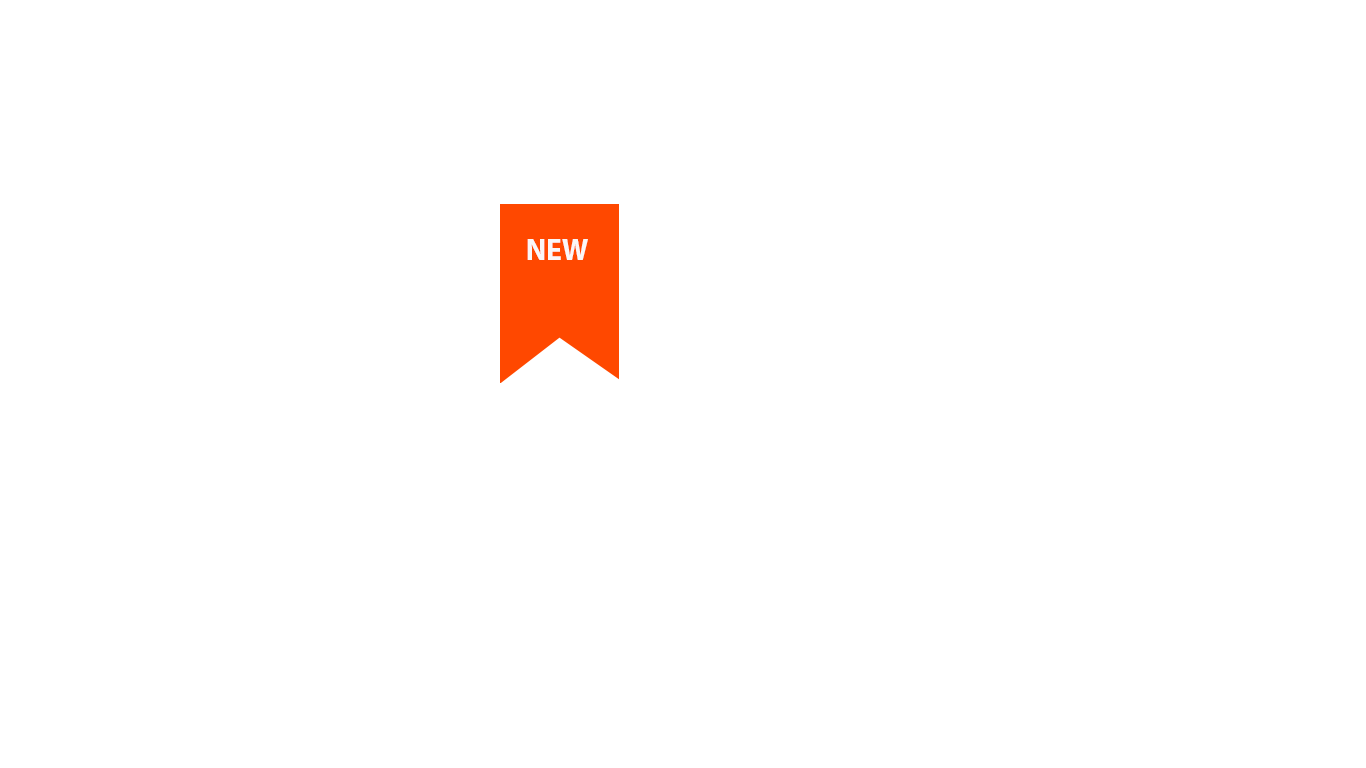
<style>
.page{position:relative;width:1366px;height:768px;background:#ffffff}
.page>*{position:absolute;margin:0}
.t1{font:30px "MyriadPro-Bold";color:#faf7f7}
</style>
<div class="page">
<p class="t1" style="left:527px;top:239px;width:61px;height:21px">NEW</p>
</div>
